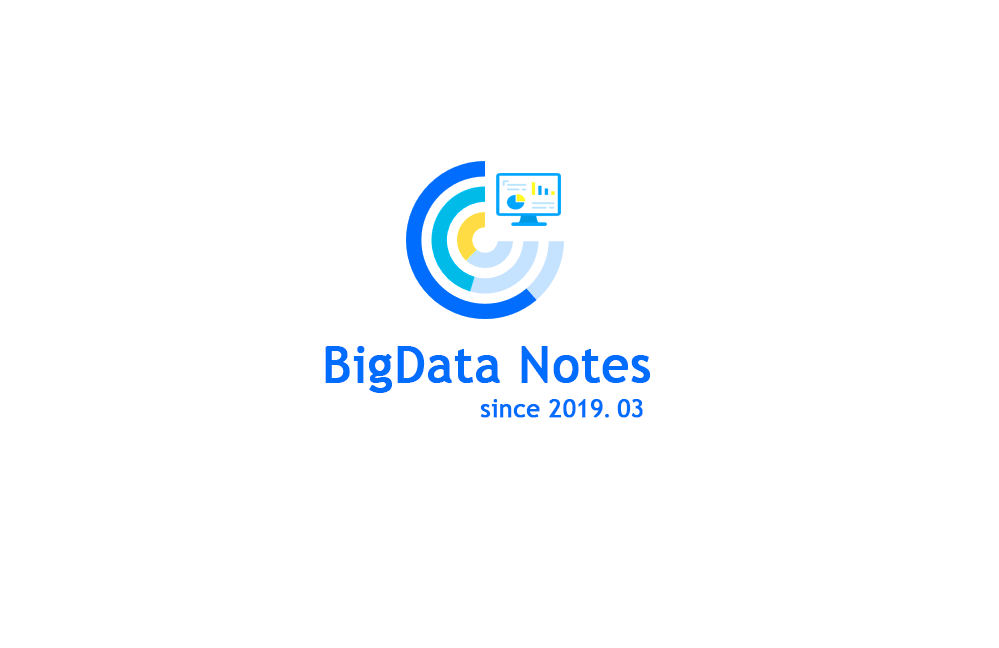
<style>
.page{position:relative;width:999px;height:648px;background:#ffffff}
.page>*{position:absolute;margin:0}
.t1{font:50px "TrebuchetMS";color:#006dff;font-weight:bold}
.t2{font:25px "TrebuchetMS";color:#006dff;font-weight:bold}
.t3{font:25px "SimSun";color:#006dff;font-weight:bold}
</style>
<div class="page">
<p class="t1" style="left:325px;top:346px;width:325px;height:47px">BigData Notes</p>
<p class="t2" style="left:480px;top:399px;width:163px;height:19px">since 2019<span class="t3">.</span>03</p>
</div>
